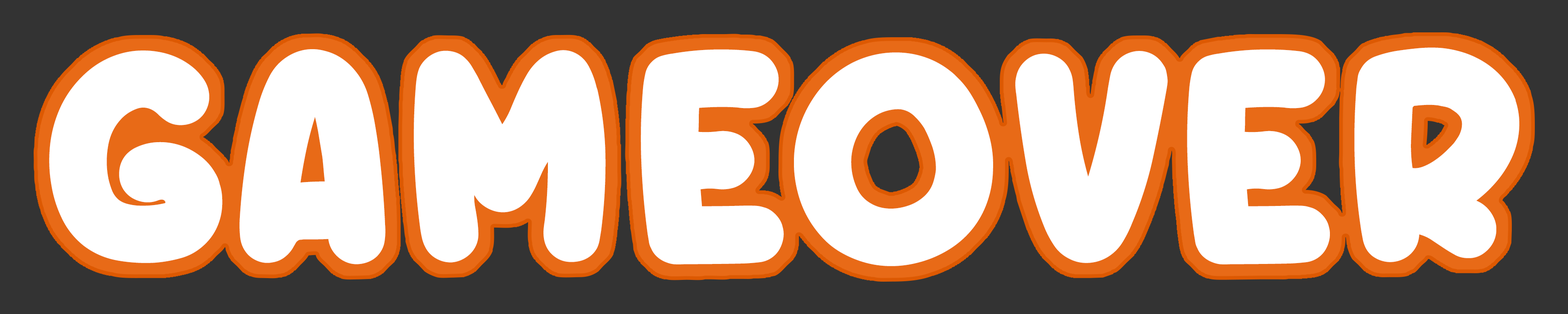
<style>
.page{position:relative;width:1568px;height:314px;background:#ffffff}
.page>*{position:absolute;margin:0}
.t1{font:354.1px "GlowingBubble";color:#ffffff}
</style>
<div class="page">
<p class="t1" style="left:49px;top:47px;width:1470px;height:219px">GAMEOVER</p>
</div>
